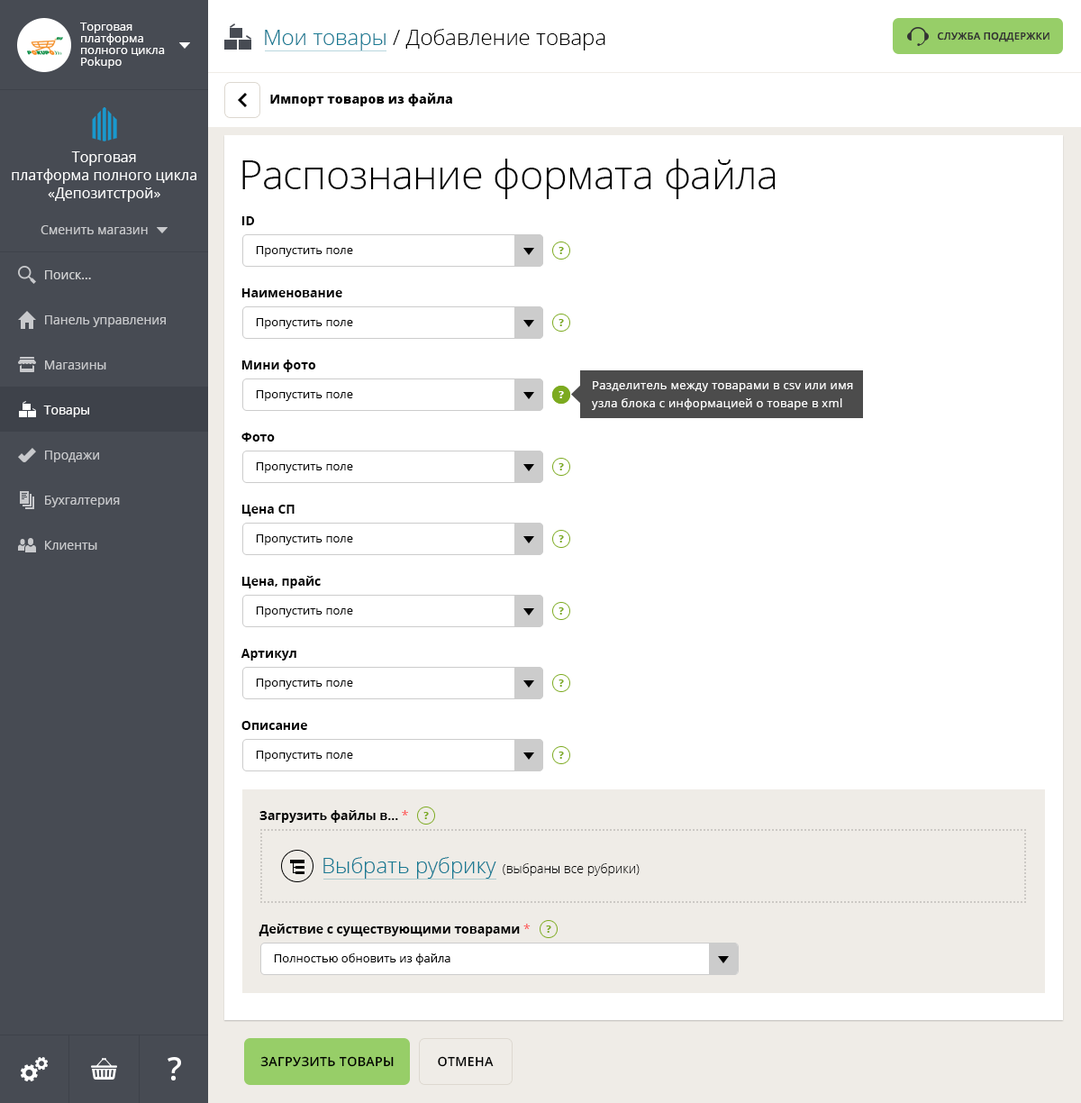
<style>
.page{position:relative;width:1081px;height:1103px;background:#ffffff}
.page>*{position:absolute;margin:0}
.t1{font:11.7px/11.7px "OpenSans";color:#ffffff}
.t2{font:21.6px "OpenSans-Light";color:#010101}
.t3{font:21.6px "OpenSans-Light";color:#177a93}
.t4{font:9.9px "OpenSans-Semibold";letter-spacing:0.025em;color:#333333;text-transform:uppercase}
.t5{font:12.6px "OpenSans-Extrabold";letter-spacing:0.01em;color:#000000}
.t6{font:14.4px/18px "OpenSans";color:#ffffff}
.t7{font:40.5px "OpenSans-Light";letter-spacing:-0.01em;color:#000000}
.t8{font:12.6px "OpenSans-Bold";color:#000000}
.t9{font:12.6px "OpenSans";color:#c8c9cc}
.t10{font:11.7px "OpenSans";color:#000000}
.t11{font:9.9px "OpenSans-Extrabold";color:#7caa1f}
.t12{font:12.6px "OpenSans";color:#d3d4d5}
.t13{font:11.7px/18px "OpenSans";letter-spacing:0.025em;color:#ffffff}
.t14{font:9.9px "OpenSans-Extrabold";color:#fefefe}
.t15{font:12.6px "OpenSans";color:#ffffff}
.t16{font:12.6px "OpenSans";color:#fd5656}
.t17{font:12.6px "OpenSans-Light";color:#000000}
.t18{font:12.6px "OpenSans-Semibold";letter-spacing:0.025em;color:#000000;text-transform:uppercase}
</style>
<div class="page">
<p class="t1" style="left:80px;top:23px;width:85px;height:45px">Торговая <br>платформа <br>полного цикла <br>Pokupo</p>
<p class="t2" style="left:265px;top:29px;width:340px;height:21px"><span class="t3">Мои товары</span> / Добавление товара</p>
<p class="t4" style="left:938px;top:32px;width:112px;height:10px">Служба поддержки</p>
<p class="t5" style="left:270px;top:93px;width:182px;height:13px">Импорт товаров из файла</p>
<p class="t6" style="left:12px;top:151px;width:184px;height:51px;text-align:center">Торговая<br>платформа полного цикла<br>«Депозитстрой»</p>
<p class="t7" style="left:242px;top:159px;width:534px;height:40px">Распознание формата файла</p>
<p class="t8" style="left:241px;top:216px;width:14px;height:9px">ID</p>
<p class="t9" style="left:41px;top:225px;width:107px;height:9px">Сменить магазин</p>
<p class="t10" style="left:256px;top:246px;width:97px;height:11px">Пропустить поле</p>
<p class="t11" style="left:559px;top:247px;width:5px;height:7px">?</p>
<p class="t12" style="left:45px;top:270px;width:46px;height:9px">Поиск...</p>
<p class="t8" style="left:241px;top:288px;width:101px;height:9px">Наименование</p>
<p class="t9" style="left:45px;top:315px;width:121px;height:12px">Панель управления</p>
<p class="t10" style="left:256px;top:318px;width:97px;height:11px">Пропустить поле</p>
<p class="t11" style="left:559px;top:319px;width:5px;height:7px">?</p>
<p class="t9" style="left:45px;top:360px;width:61px;height:9px">Магазины</p>
<p class="t8" style="left:241px;top:360px;width:75px;height:12px">Мини фото</p>
<p class="t13" style="left:592px;top:381px;width:261px;height:29px">Разделитель между товарами в csv или имя <br>узла блока с информацией о товаре в xml</p>
<p class="t10" style="left:256px;top:390px;width:97px;height:11px">Пропустить поле</p>
<p class="t14" style="left:559px;top:391px;width:5px;height:7px">?</p>
<p class="t14" style="left:559px;top:391px;width:5px;height:7px">?</p>
<p class="t15" style="left:43px;top:405px;width:46px;height:12px">Товары</p>
<p class="t8" style="left:241px;top:432px;width:34px;height:10px">Фото</p>
<p class="t9" style="left:45px;top:451px;width:54px;height:11px">Продажи</p>
<p class="t10" style="left:256px;top:462px;width:97px;height:11px">Пропустить поле</p>
<p class="t11" style="left:559px;top:463px;width:5px;height:7px">?</p>
<p class="t9" style="left:45px;top:496px;width:75px;height:11px">Бухгалтерия</p>
<p class="t8" style="left:241px;top:505px;width:54px;height:11px">Цена СП</p>
<p class="t9" style="left:45px;top:541px;width:52px;height:9px">Клиенты</p>
<p class="t10" style="left:256px;top:534px;width:97px;height:11px">Пропустить поле</p>
<p class="t11" style="left:559px;top:535px;width:5px;height:7px">?</p>
<p class="t8" style="left:241px;top:576px;width:80px;height:12px">Цена, прайс</p>
<p class="t10" style="left:256px;top:606px;width:97px;height:11px">Пропустить поле</p>
<p class="t11" style="left:559px;top:607px;width:5px;height:7px">?</p>
<p class="t8" style="left:241px;top:649px;width:55px;height:11px">Артикул</p>
<p class="t10" style="left:256px;top:678px;width:97px;height:11px">Пропустить поле</p>
<p class="t11" style="left:559px;top:679px;width:5px;height:8px">?</p>
<p class="t8" style="left:241px;top:721px;width:66px;height:9px">Описание</p>
<p class="t10" style="left:256px;top:751px;width:97px;height:10px">Пропустить поле</p>
<p class="t11" style="left:559px;top:751px;width:5px;height:8px">?</p>
<p class="t8" style="left:259px;top:810px;width:149px;height:13px">Загрузить файлы в... <span class="t16">*</span></p>
<p class="t11" style="left:423px;top:812px;width:6px;height:7px">?</p>
<p class="t17" style="left:323px;top:857px;width:317px;height:21px"><span class="t3">Выбрать рубрику</span>  (выбраны все рубрики)</p>
<p class="t8" style="left:259px;top:924px;width:272px;height:12px">Действие с существующими товарами <span class="t16">*</span></p>
<p class="t11" style="left:546px;top:925px;width:5px;height:8px">?</p>
<p class="t10" style="left:274px;top:953px;width:177px;height:12px">Полностью обновить из файла</p>
<p class="t18" style="left:260px;top:1056px;width:134px;height:11px">загрузить товары</p>
<p class="t18" style="left:438px;top:1056px;width:56px;height:11px">Отмена</p>
</div>
